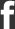
<style>
.page{position:relative;width:15px;height:29px;background:#ffffff}
.page>*{position:absolute;margin:0}
.t1{font:40.1px "KlavikaBold-Plain";color:#ffffff}
</style>
<div class="page">
<p class="t1" style="left:0px;top:0px;width:15px;height:29px">f</p>
</div>
